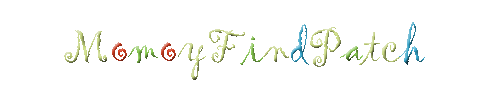
<style>
.page{position:relative;width:500px;height:100px;background:#ffffff}
.page>*{position:absolute;margin:0}
.t1{font:48px "Gigi-Regular"}
</style>
<div class="page">
<p class="t1" style="left:64px;top:22px;width:361px;height:58px">MomoyFindPatch</p>
</div>
